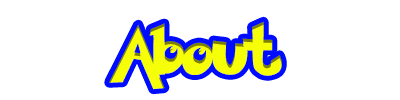
<style>
.page{position:relative;width:400px;height:100px;background:#ffffff}
.page>*{position:absolute;margin:0}
.t1{font:55px "PokemonSolidNormal";letter-spacing:0.03em;color:#f6ff08}
</style>
<div class="page">
<p class="t1" style="left:109px;top:21px;width:173px;height:69px">About</p>
</div>
